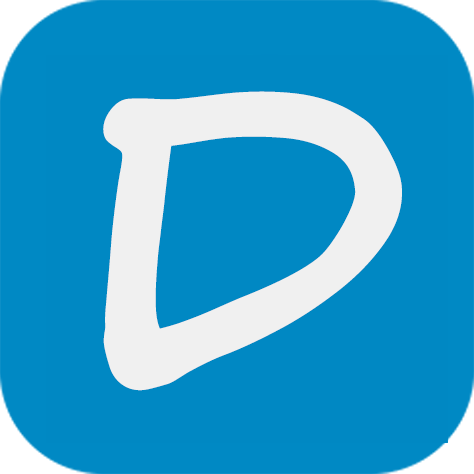
<style>
.page{position:relative;width:474px;height:474px;background:#0088c3}
.page>*{position:absolute;margin:0}
.t1{font:415.6px "SegoeScript";letter-spacing:-0.06em;color:#f0f0f0;font-weight:bold}
</style>
<div class="page">
<p class="t1" style="left:103px;top:91px;width:299px;height:300px;rotate:-4deg">D</p>
</div>
